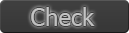
<style>
.page{position:relative;width:129px;height:33px}
.page>*{position:absolute;margin:0}
.t1{font:24px "Tahoma";color:#c2c2c2}
</style>
<div class="page">
<p class="t1" style="left:31px;top:7px;width:64px;height:19px">Check</p>
</div>
